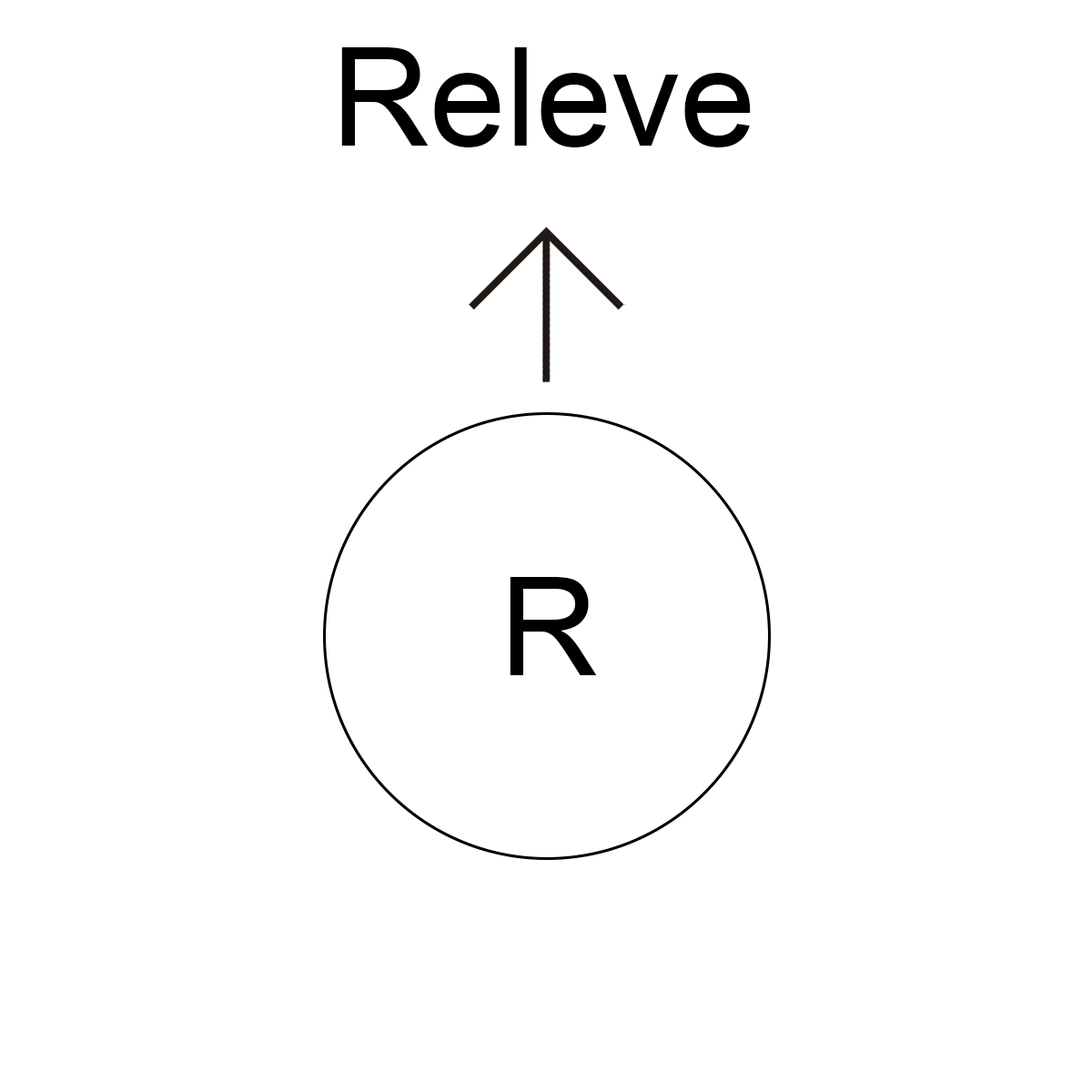
<style>
.page{position:relative;width:1092px;height:1092px;background:#ffffff}
.page>*{position:absolute;margin:0}
.t1{font:136.5px "ArialMT";color:#000000}
</style>
<div class="page">
<p class="t1" style="left:341px;top:47px;width:410px;height:100px">Releve</p>
<p class="t1" style="left:510px;top:577px;width:87px;height:98px">R</p>
</div>
